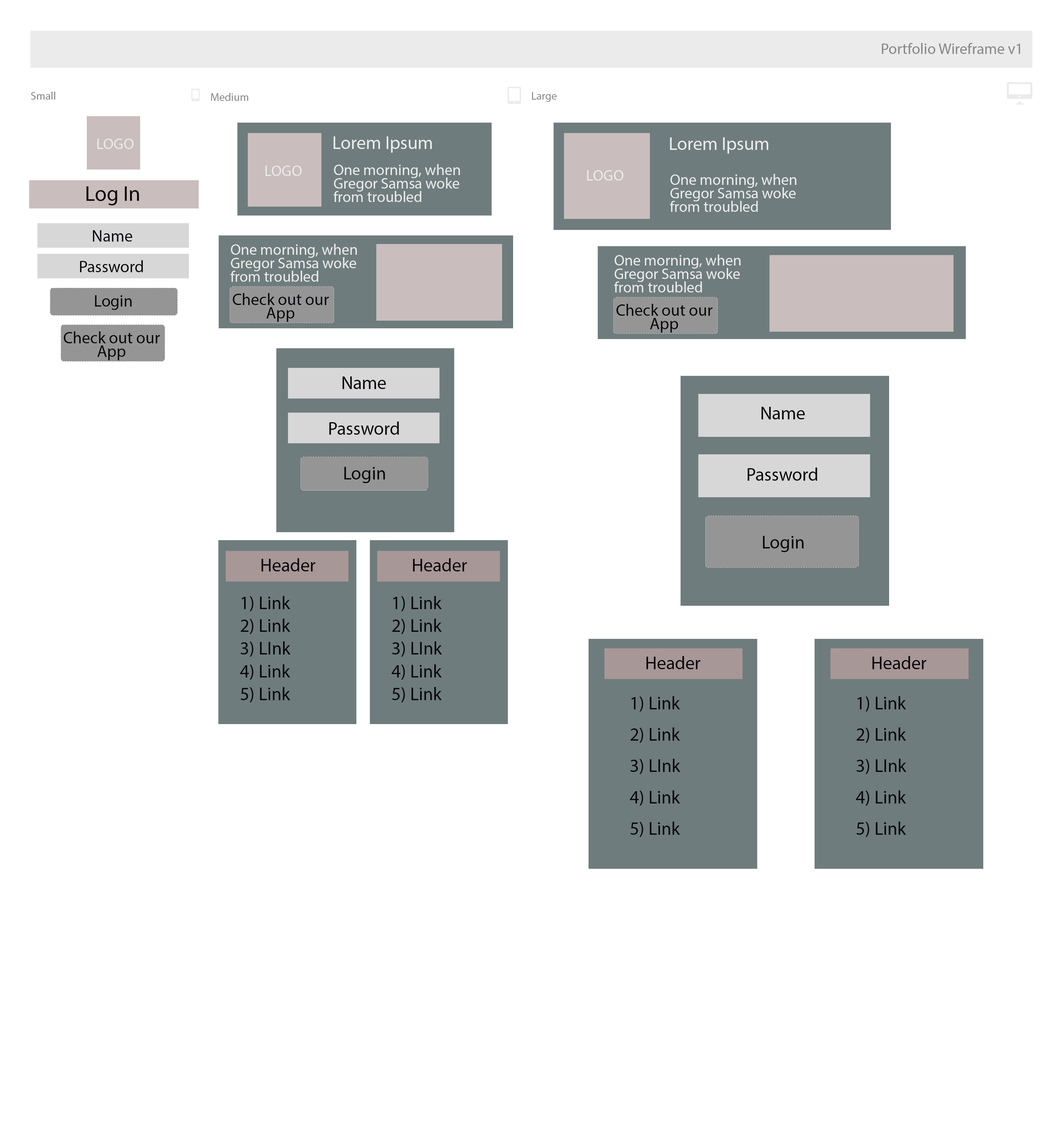
<style>
.page{position:relative;width:1063px;height:1122px;background:#ffffff}
.page>*{position:absolute;margin:0}
.t1{font:15.3px "MyriadPro-Regular";color:#878787}
.t2{font:11px "MyriadPro-Regular";color:#878787}
.t3{font:18.4px "MyriadPro-Regular";color:#ebebeb}
.t4{font:15.3px "MyriadPro-Regular";color:#ebebeb}
.t5{font:15.3px/13.5px "MyriadPro-Regular";color:#ebebeb}
.t6{font:21.5px "MyriadPro-Regular";color:#09080c}
.t7{font:16.6px "MyriadPro-Regular";color:#09080c}
.t8{font:16.6px/13.5px "MyriadPro-Regular";color:#09080c}
.t9{font:18.4px "MyriadPro-Regular";color:#09080c}
.t10{font:18.4px/22.1px "MyriadPro-Regular";color:#09080c}
.t11{font:18.4px/30.7px "MyriadPro-Regular";color:#09080c}
</style>
<div class="page">
<p class="t1" style="left:881px;top:43px;width:139px;height:11px">Portfolio Wireframe v1</p>
<p class="t2" style="left:31px;top:92px;width:24px;height:8px">Small</p>
<p class="t2" style="left:211px;top:93px;width:37px;height:8px">Medium</p>
<p class="t2" style="left:532px;top:92px;width:24px;height:10px">Large</p>
<p class="t3" style="left:333px;top:136px;width:99px;height:17px">Lorem Ipsum</p>
<p class="t3" style="left:670px;top:137px;width:98px;height:17px">Lorem Ipsum</p>
<p class="t4" style="left:97px;top:139px;width:37px;height:10px">LOGO</p>
<p class="t4" style="left:265px;top:166px;width:37px;height:10px">LOGO</p>
<p class="t5" style="left:333px;top:164px;width:127px;height:38px">One morning, when Gregor Samsa woke from troubled</p>
<p class="t4" style="left:587px;top:170px;width:36px;height:11px">LOGO</p>
<p class="t5" style="left:670px;top:174px;width:126px;height:38px">One morning, when Gregor Samsa woke from troubled</p>
<p class="t6" style="left:86px;top:186px;width:53px;height:19px">Log In</p>
<p class="t7" style="left:93px;top:230px;width:39px;height:12px">Name</p>
<p class="t5" style="left:230px;top:244px;width:127px;height:38px">One morning, when Gregor Samsa woke from troubled</p>
<p class="t5" style="left:614px;top:254px;width:126px;height:38px">One morning, when Gregor Samsa woke from troubled</p>
<p class="t7" style="left:80px;top:260px;width:63px;height:12px">Password</p>
<p class="t8" style="left:233px;top:293px;width:96px;height:29px;text-align:center">Check out our App</p>
<p class="t7" style="left:95px;top:295px;width:37px;height:15px">Login</p>
<p class="t8" style="left:616px;top:304px;width:96px;height:29px;text-align:center">Check out our App</p>
<p class="t8" style="left:64px;top:331px;width:96px;height:29px;text-align:center">Check out our App</p>
<p class="t9" style="left:342px;top:376px;width:44px;height:13px">Name</p>
<p class="t9" style="left:761px;top:407px;width:43px;height:12px">Name</p>
<p class="t9" style="left:329px;top:422px;width:70px;height:13px">Password</p>
<p class="t9" style="left:344px;top:467px;width:41px;height:16px">Login</p>
<p class="t9" style="left:747px;top:468px;width:70px;height:13px">Password</p>
<p class="t9" style="left:762px;top:536px;width:41px;height:16px">Login</p>
<p class="t9" style="left:261px;top:558px;width:54px;height:13px">Header</p>
<p class="t9" style="left:413px;top:558px;width:54px;height:13px">Header</p>
<p class="t10" style="left:240px;top:596px;width:51px;height:106px">1) Link<br>2) Link<br>3) LInk<br>4) Link<br>5) Link</p>
<p class="t10" style="left:392px;top:596px;width:50px;height:106px">1) Link<br>2) Link<br>3) LInk<br>4) Link<br>5) Link</p>
<p class="t9" style="left:646px;top:656px;width:54px;height:13px">Header</p>
<p class="t9" style="left:872px;top:656px;width:54px;height:13px">Header</p>
<p class="t11" style="left:630px;top:696px;width:50px;height:141px">1) Link<br>2) Link<br>3) LInk<br>4) Link<br>5) Link</p>
<p class="t11" style="left:856px;top:696px;width:50px;height:141px">1) Link<br>2) Link<br>3) LInk<br>4) Link<br>5) Link</p>
</div>
